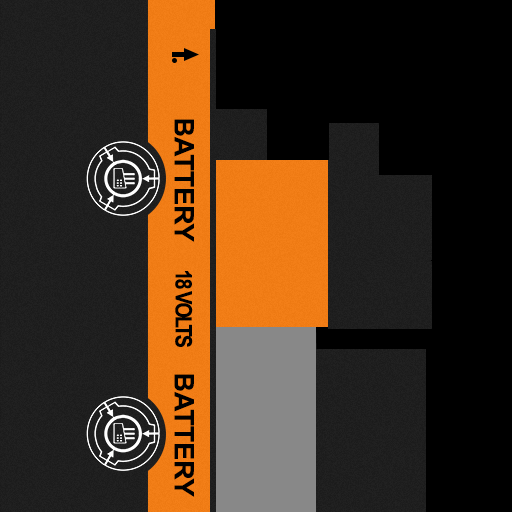
<style>
.page{position:relative;width:512px;height:512px;background:#000000}
.page>*{position:absolute;margin:0}
.t1{font:26.9px "Arial-BoldMT";color:#000000}
.t2{font:22.7px "Arial-BoldMT";letter-spacing:-0.1em;color:#000000;scale:0.87 1}
</style>
<div class="page">
<p class="t1" style="left:174px;top:119px;width:20px;height:123px;rotate:90deg">BATTERY</p>
<p class="t2" style="left:175px;top:271px;width:18px;height:76px;rotate:90deg">18 VOLTS</p>
<p class="t1" style="left:174px;top:374px;width:20px;height:123px;rotate:90deg">BATTERY</p>
</div>
